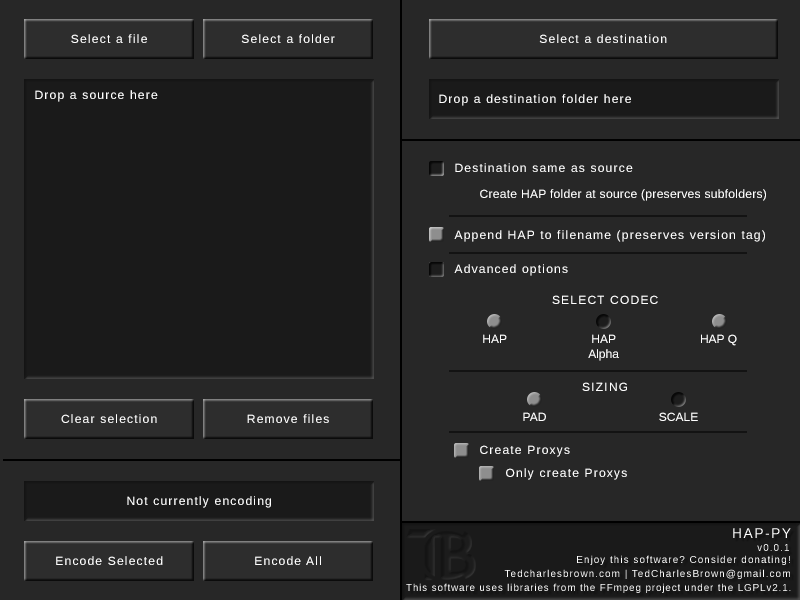
<style>
.page{position:relative;width:800px;height:600px;background:#272727}
.page>*{position:absolute;margin:0}
.t1{font:12px "LiberationSans";letter-spacing:0.1em;color:#ffffff}
.t2{font:12px "LiberationSans";letter-spacing:0.025em;color:#ffffff}
.t3{font:12px "LiberationSans";color:#ffffff}
.t4{font:14px "LiberationSans";letter-spacing:0.1em;color:#ffffff}
.t5{font:10px "LiberationSans";letter-spacing:0.1em}
.t6{font:10px "LiberationSans";letter-spacing:0.1em;color:#ffffff}
.t7{font:10px "LiberationSans";letter-spacing:0.08em;color:#ffffff}
</style>
<div class="page">
<p class="t1" style="left:71px;top:34px;width:76px;height:9px">Select a file</p>
<p class="t1" style="left:241px;top:34px;width:94px;height:9px">Select a folder</p>
<p class="t1" style="left:539px;top:34px;width:128px;height:9px">Select a destination</p>
<p class="t1" style="left:35px;top:90px;width:123px;height:12px">Drop a source here</p>
<p class="t1" style="left:439px;top:94px;width:192px;height:12px">Drop a destination folder here</p>
<p class="t1" style="left:455px;top:163px;width:178px;height:9px">Destination same as source</p>
<p class="t2" style="left:480px;top:189px;width:286px;height:12px">Create HAP folder at source (preserves subfolders)</p>
<p class="t1" style="left:454px;top:230px;width:311px;height:12px">Append HAP to filename (preserves version tag)</p>
<p class="t1" style="left:454px;top:264px;width:114px;height:12px">Advanced options</p>
<p class="t1" style="left:552px;top:295px;width:106px;height:9px">SELECT CODEC</p>
<p class="t3" style="left:483px;top:334px;width:24px;height:9px">HAP</p>
<p class="t3" style="left:588px;top:334px;width:31px;height:27px;text-align:center">HAP<br>Alpha</p>
<p class="t3" style="left:701px;top:334px;width:36px;height:12px">HAP Q</p>
<p class="t1" style="left:582px;top:382px;width:45px;height:9px">SIZING</p>
<p class="t1" style="left:61px;top:414px;width:96px;height:9px">Clear selection</p>
<p class="t1" style="left:247px;top:414px;width:82px;height:9px">Remove files</p>
<p class="t3" style="left:523px;top:412px;width:23px;height:9px">PAD</p>
<p class="t3" style="left:659px;top:412px;width:39px;height:9px">SCALE</p>
<p class="t1" style="left:480px;top:445px;width:90px;height:12px">Create Proxys</p>
<p class="t1" style="left:506px;top:468px;width:121px;height:12px">Only create Proxys</p>
<p class="t1" style="left:127px;top:496px;width:144px;height:12px">Not currently encoding</p>
<p class="t4" style="left:733px;top:528px;width:58px;height:10px">HAP-PY</p>
<p class="t5" style="left:757px;top:544px;width:32px;height:7px">v0.0.1</p>
<p class="t1" style="left:56px;top:556px;width:107px;height:9px">Encode Selected</p>
<p class="t1" style="left:255px;top:556px;width:66px;height:9px">Encode All</p>
<p class="t6" style="left:577px;top:555px;width:213px;height:10px">Enjoy this software? Consider donating!</p>
<p class="t6" style="left:504px;top:569px;width:286px;height:10px">Tedcharlesbrown.com | TedCharlesBrown@gmail.com</p>
<p class="t7" style="left:406px;top:583px;width:385px;height:10px">This software uses libraries from the FFmpeg project under the LGPLv2.1.</p>
</div>
